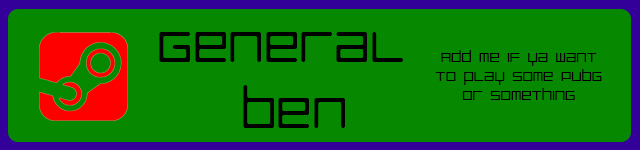
<style>
.page{position:relative;width:640px;height:150px;background:#068900}
.page>*{position:absolute;margin:0}
.t1{font:55px "LuggageRoundLight";color:#000000}
.t2{font:16px "LuggageRoundLight";color:#000000}
</style>
<div class="page">
<p class="t1" style="left:159px;top:32px;width:244px;height:96px;text-align:center">General<br> Ben</p>
<p class="t2" style="left:435px;top:50px;width:167px;height:50px;text-align:center">Add me if ya want to play some PUBG or something</p>
</div>
